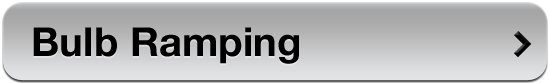
<style>
.page{position:relative;width:549px;height:83px}
.page>*{position:absolute;margin:0}
.t1{font:40px "HelveticaNeue-Bold";letter-spacing:0.005em;color:#000000}
</style>
<div class="page">
<p class="t1" style="left:33px;top:27px;width:266px;height:37px">Bulb Ramping</p>
</div>
